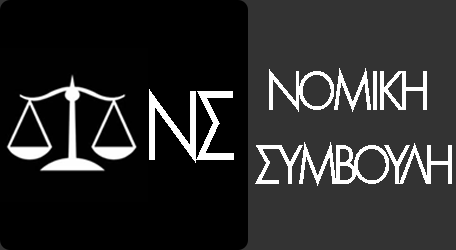
<style>
.page{position:relative;width:456px;height:250px;background:#333333}
.page>*{position:absolute;margin:0}
.t1{font:81.2px "MgFutureUCPolNormal";letter-spacing:-0.1em;color:#ffffff;font-variant:small-caps;scale:0.86 1}
.t2{font:80.1px "MgFutureUCPolNormal";letter-spacing:-0.1em;color:#ffffff;font-variant:small-caps;scale:0.86 1}
.t3{font:141.3px "MgFutureUCPolNormal";letter-spacing:-0.1em;color:#ffffff;font-variant:small-caps;scale:0.76 1}
</style>
<div class="page">
<p class="t1" style="left:255px;top:68px;width:197px;height:118px"><span class="t2"> </span>νομικη <br>συμβουλη</p>
<p class="t3" style="left:149px;top:89px;width:85px;height:74px">νσ</p>
</div>
